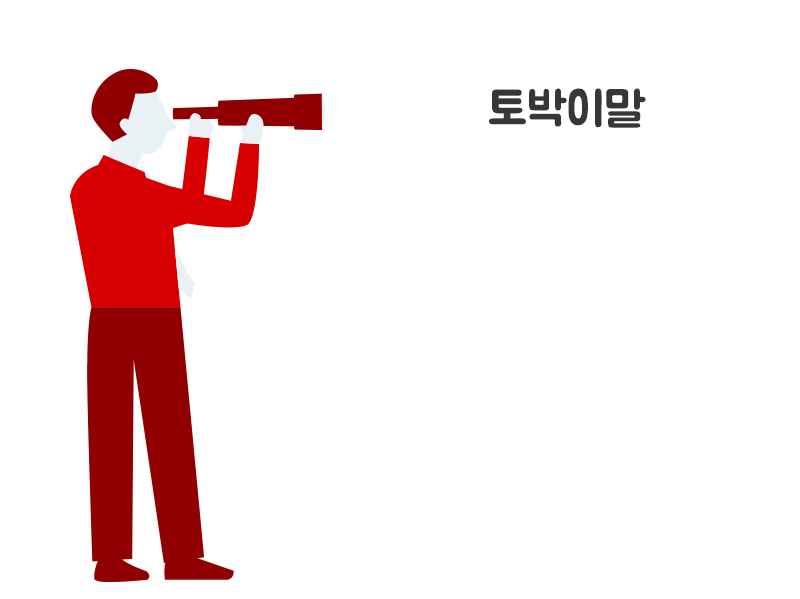
<style>
.page{position:relative;width:800px;height:599px;background:#ffffff}
.page>*{position:absolute;margin:0}
.t1{font:47.8px "BMJUA";color:#373737}
</style>
<div class="page">
<p class="t1" style="left:488px;top:88px;width:158px;height:40px">토박이말</p>
</div>
